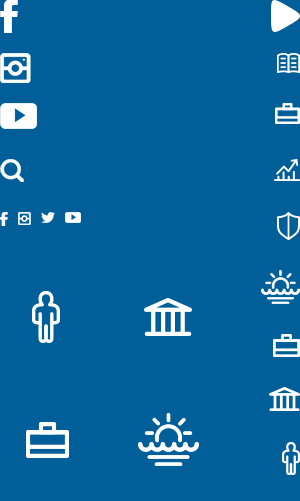
<style>
.page{position:relative;width:300px;height:501px;background:#005f98}
.page>*{position:absolute;margin:0}
.t1{font:47.9px "SocialFontFace";color:#ffffff}
.t2{font:20.3px "SocialFontFace";color:#ffffff}
</style>
<div class="page">
<p class="t1" style="left:0px;top:0px;width:18px;height:33px">F</p>
<p class="t2" style="left:0px;top:212px;width:8px;height:14px">F</p>
</div>
